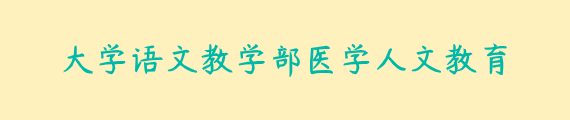
<style>
.page{position:relative;width:570px;height:120px;background:#fef1bd}
.page>*{position:absolute;margin:0}
.t1{font:35px "YRDZST-Semibold";color:#00b8a9}
</style>
<div class="page">
<p class="t1" style="left:63px;top:43px;width:444px;height:34px">大学语文教学部医学人文教育</p>
</div>
